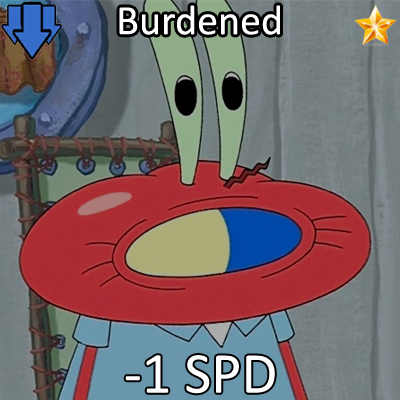
<style>
.page{position:relative;width:400px;height:400px}
.page>*{position:absolute;margin:0}
.t1{font:72px "Calibri";color:#ffffff}
.t2{font:100px "Calibri";color:#ffffff}
</style>
<div class="page">
<p class="t1" style="left:119px;top:5px;width:161px;height:30px">Burdened</p>
<p class="t2" style="left:125px;top:355px;width:150px;height:39px">-1 SPD</p>
</div>
